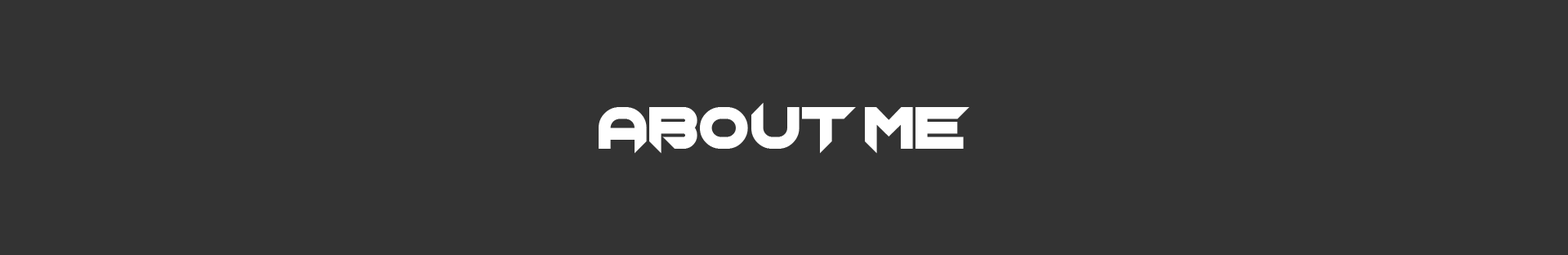
<style>
.page{position:relative;width:1568px;height:255px;background:#333333}
.page>*{position:absolute;margin:0}
.t1{font:61.2px "Chopsic";color:#ffffff}
</style>
<div class="page">
<p class="t1" style="left:599px;top:102px;width:370px;height:52px">About me</p>
</div>
